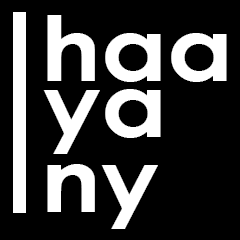
<style>
.page{position:relative;width:240px;height:240px;background:#000000}
.page>*{position:absolute;margin:0}
.t1{font:89.4px "CenturyGothic-Bold";color:#ffffff;scale:1.12 1}
</style>
<div class="page">
<p class="t1" style="left:47px;top:15px;width:180px;height:67px">haa</p>
<p class="t1" style="left:43px;top:89px;width:118px;height:65px">ya</p>
<p class="t1" style="left:47px;top:164px;width:111px;height:65px">ny</p>
</div>
